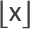
<style>
.page{position:relative;width:30px;height:29px;background:#ffffff}
.page>*{position:absolute;margin:0}
.t1{font:30px "LucidaSansUnicode";color:#3c3c3c}
.t2{font:30px "Calibri";color:#3c3c3c}
</style>
<div class="page">
<p class="t1" style="left:0px;top:0px;width:8px;height:28px">⌊</p>
<p class="t1" style="left:22px;top:0px;width:8px;height:29px">⌋</p>
<p class="t2" style="left:9px;top:7px;width:12px;height:14px">x</p>
</div>
